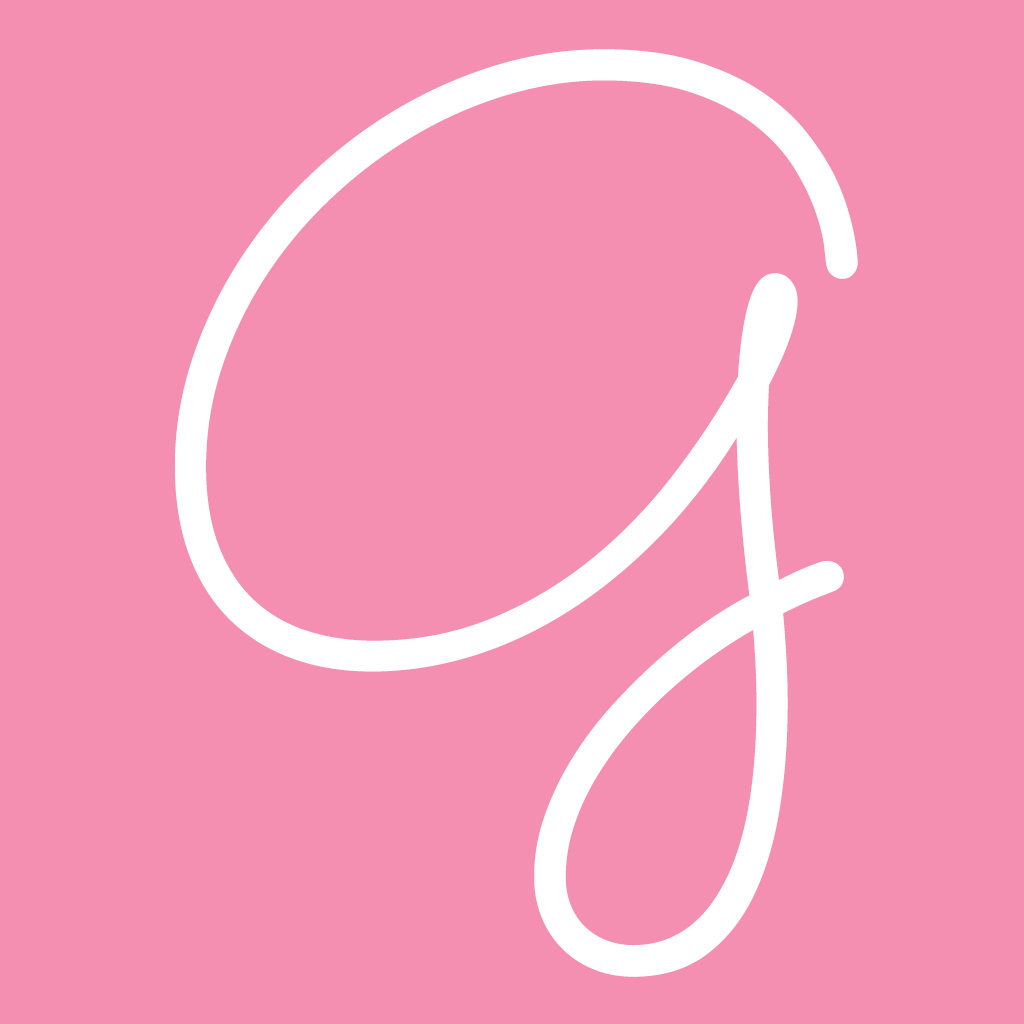
<style>
.page{position:relative;width:1024px;height:1024px;background:#f48fb1}
.page>*{position:absolute;margin:0}
.t1{font:844.7px "Sacramento-Regular";letter-spacing:0.01em;color:#ffffff}
</style>
<div class="page">
<p class="t1" style="left:174px;top:49px;width:684px;height:928px">G</p>
</div>
